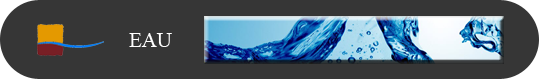
<style>
.page{position:relative;width:540px;height:80px;background:#363636}
.page>*{position:absolute;margin:0}
.t1{font:20.8px "TimesNewRomanPSMT";color:#ffffff}
</style>
<div class="page">
<p class="t1" style="left:129px;top:33px;width:43px;height:14px">EAU</p>
</div>
